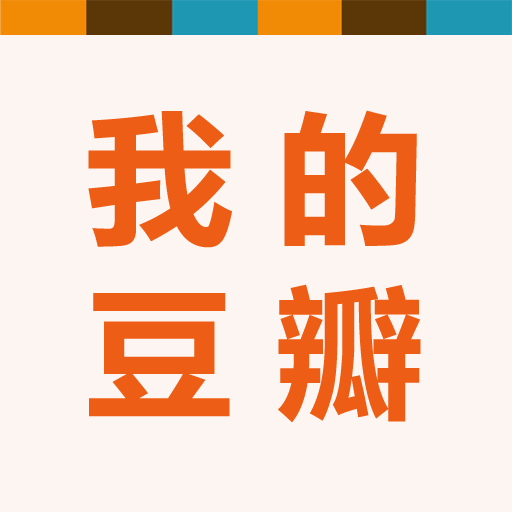
<style>
.page{position:relative;width:512px;height:512px;background:#fcf5f1}
.page>*{position:absolute;margin:0}
.t1{font:142.1px "MicrosoftYaHei-Bold";color:#ee5d15;scale:1.03 1}
</style>
<div class="page">
<p class="t1" style="left:88px;top:110px;width:329px;height:138px">我 的</p>
<p class="t1" style="left:89px;top:284px;width:332px;height:139px">豆 瓣</p>
</div>
